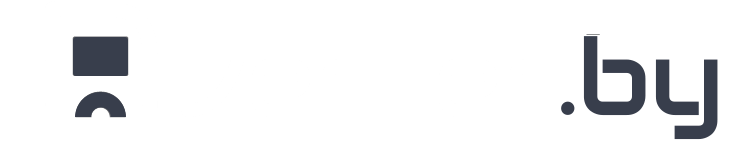
<style>
.page{position:relative;width:729px;height:143px;background:#ffffff}
.page>*{position:absolute;margin:0}
.t1{font:104.7px "Audiowide-Regular";color:#383e4c}
</style>
<div class="page">
<p class="t1" style="left:561px;top:36px;width:157px;height:104px">.by</p>
</div>
